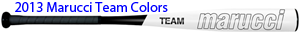
<style>
.page{position:relative;width:300px;height:33px;background:#ffffff}
.page>*{position:absolute;margin:0}
.t1{font:14px "MyriadPro-Regular";color:#0000ff}
</style>
<div class="page">
<p class="t1" style="left:15px;top:2px;width:153px;height:10px">2013 Marucci Team Colors</p>
</div>
